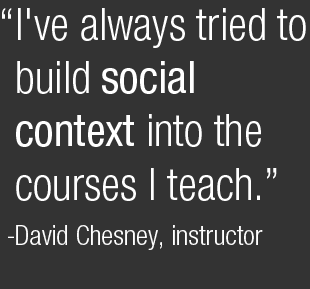
<style>
.page{position:relative;width:310px;height:289px;background:#333333}
.page>*{position:absolute;margin:0}
.t1{font:44.4px "HelveticaNeue-LightCond";color:#ffffff}
.t2{font:44.4px "HelveticaNeue-Condensed";color:#ffffff}
.t3{font:27.4px/45px "HelveticaNeue-LightCond";color:#ffffff}
</style>
<div class="page">
<p class="t1" style="left:2px;top:8px;width:304px;height:242px">“I've always tried to build <span class="t2">social <br>context </span>into the courses I teach.”<br><span class="t3">-David Chesney, instructor</span></p>
</div>
